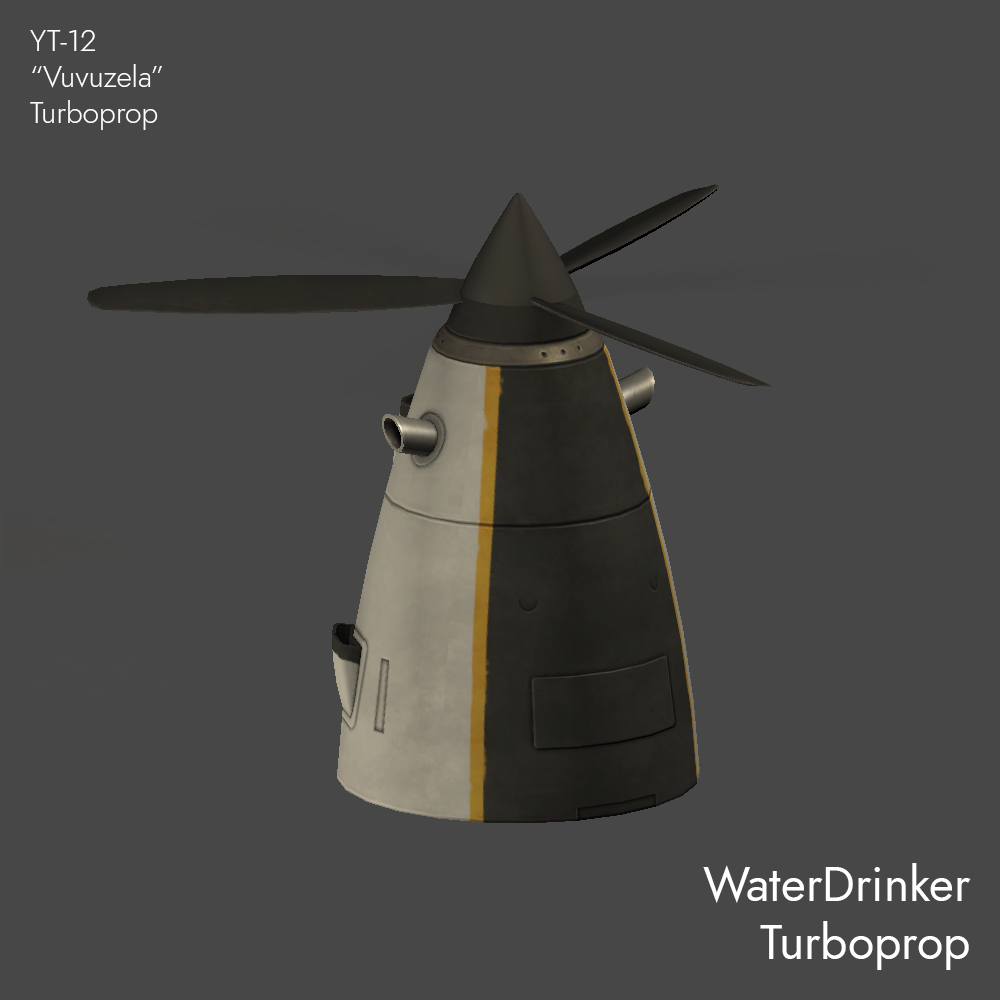
<style>
.page{position:relative;width:1000px;height:1000px;background:#474747}
.page>*{position:absolute;margin:0}
.t1{font:30px "Renner-it-Light";color:#ffffff}
.t2{font:48px "Renner-it-Book";color:#ffffff}
</style>
<div class="page">
<p class="t1" style="left:30px;top:30px;width:132px;height:100px">YT-12<br>“Vuvuzela”<br>Turboprop</p>
<p class="t2" style="left:703px;top:863px;width:268px;height:107px;text-align:right">WaterDrinker<br>Turboprop</p>
</div>
